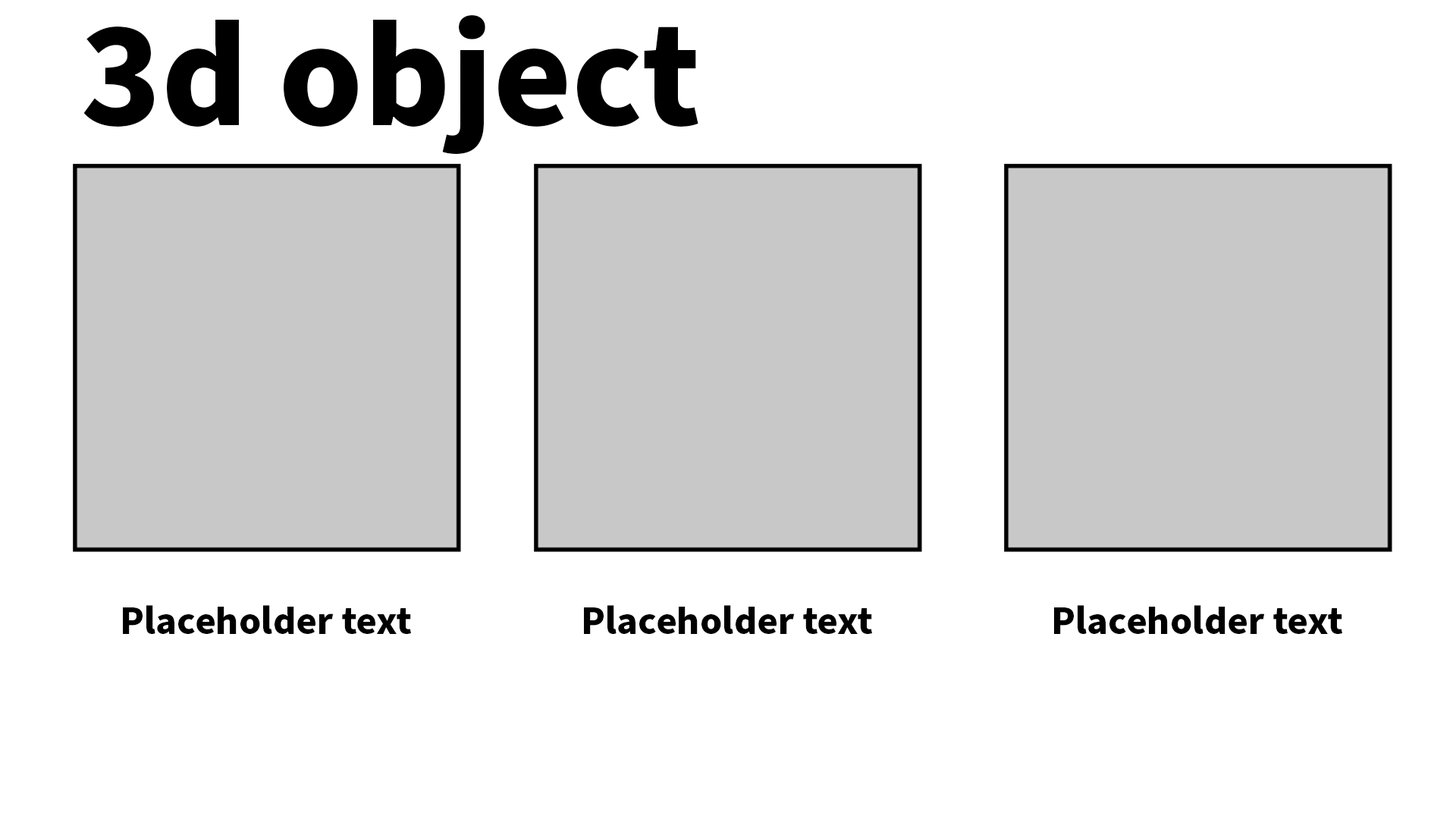
<style>
.page{position:relative;width:1456px;height:819px;background:#ffffff}
.page>*{position:absolute;margin:0}
.t1{font:151.7px "SourceSansPro-Bold";color:#000000}
.t2{font:40.2px "SourceSansPro-Bold";color:#000000}
</style>
<div class="page">
<p class="t1" style="left:83px;top:15px;width:615px;height:140px">3d object</p>
<p class="t2" style="left:123px;top:605px;width:288px;height:29px">Placeholder text</p>
<p class="t2" style="left:584px;top:605px;width:288px;height:29px">Placeholder text</p>
<p class="t2" style="left:1054px;top:605px;width:288px;height:29px">Placeholder text</p>
</div>
